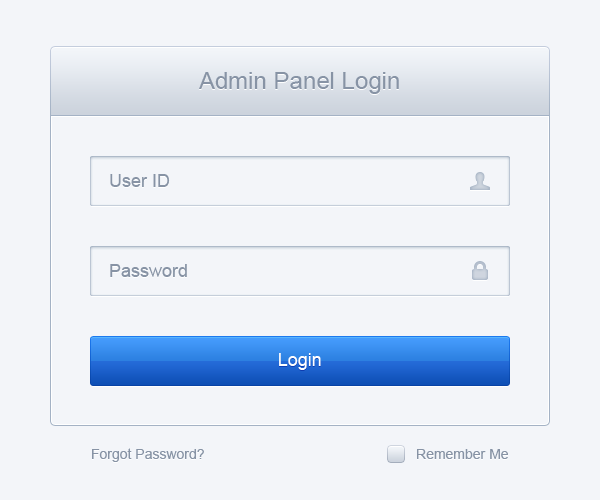
<style>
.page{position:relative;width:600px;height:500px;background:#f3f5f9}
.page>*{position:absolute;margin:0}
.t1{font:24px "ArialMT";color:#8894a6}
.t2{font:18px "ArialMT";color:#8894a6}
.t3{font:18px "ArialMT";color:#ffffff}
.t4{font:14px "ArialMT";color:#8894a6}
</style>
<div class="page">
<p class="t1" style="left:199px;top:72px;width:200px;height:22px">Admin Panel Login</p>
<p class="t2" style="left:110px;top:174px;width:60px;height:13px">User ID</p>
<p class="t2" style="left:110px;top:264px;width:77px;height:13px">Password</p>
<p class="t3" style="left:279px;top:353px;width:42px;height:17px">Login</p>
<p class="t4" style="left:92px;top:448px;width:112px;height:14px">Forgot Password?</p>
<p class="t4" style="left:417px;top:449px;width:91px;height:10px">Remember Me</p>
</div>
